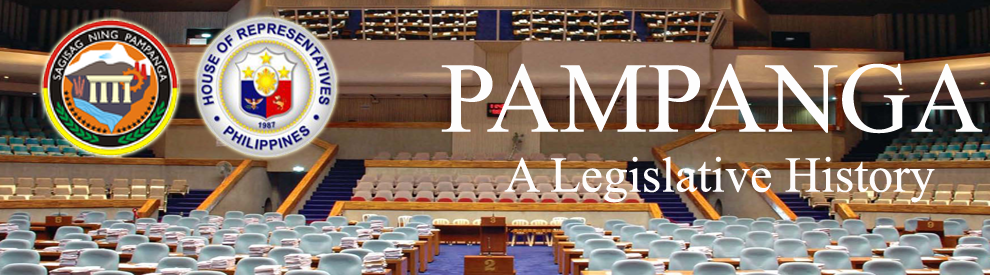
<style>
.page{position:relative;width:990px;height:275px}
.page>*{position:absolute;margin:0}
.t1{font:50px "TimesNewRomanPSMT";color:#fdfcfc}
.t2{font:100px "TimesNewRomanPSMT";color:#fdfdfd}
</style>
<div class="page">
<p class="t1" style="left:441px;top:63px;width:542px;height:140px;text-align:center"><span class="t2">PAMPANGA<br></span>A Legislative History</p>
</div>
